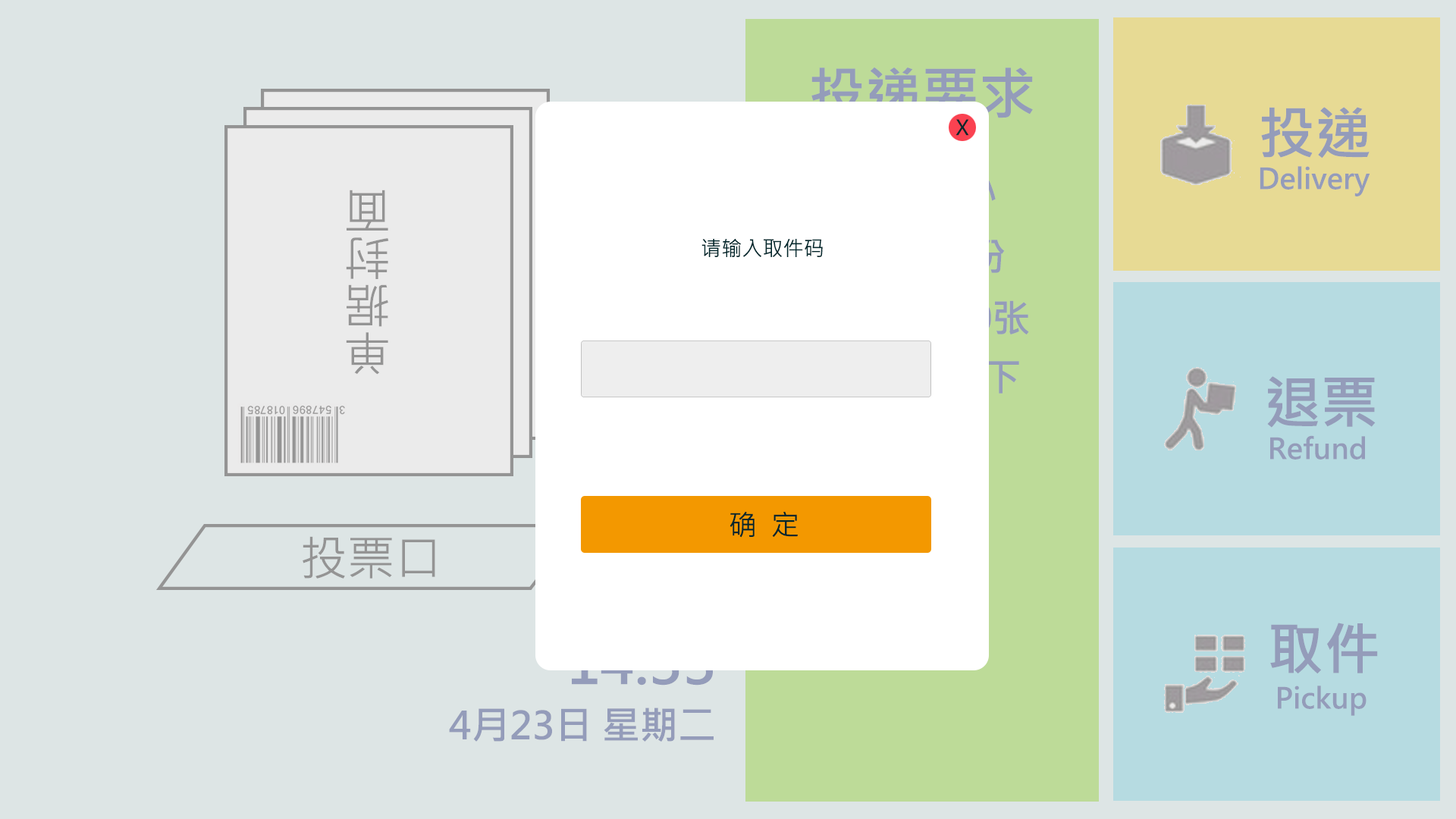
<style>
.page{position:relative;width:1456px;height:819px;background:#dde5e5}
.page>*{position:absolute;margin:0}
.t1{font:56.9px "MicrosoftJhengHeiBold";color:#949cba}
.t2{font:28.4px "MicrosoftJhengHeiBold";color:#949cba}
.t3{font:47.4px "MicrosoftJhengHeiRegular";color:#949494}
.t4{font:20.5px "MicrosoftJhengHeiRegular";color:#00272c}
.t5{font:28.4px "MicrosoftJhengHeiRegular";color:#00272c}
.t6{font:56.9px "MicrosoftJhengHeiBold"}
.t7{font:37.9px "MicrosoftJhengHeiBold";color:#949cba}
</style>
<div class="page">
<p class="t1" style="left:811px;top:67px;width:222px;height:51px">投递要求</p>
<p class="t1" style="left:1261px;top:107px;width:109px;height:51px">投递</p>
<p class="t2" style="left:1260px;top:166px;width:110px;height:30px">Delivery</p>
<p class="t3" style="left:346px;top:190px;width:43px;height:185px;rotate:180deg">单据封面</p>
<p class="t4" style="left:701px;top:238px;width:122px;height:19px">请输入取件码</p>
<p class="t1" style="left:1267px;top:376px;width:109px;height:52px">退票</p>
<p class="t2" style="left:1270px;top:435px;width:95px;height:25px">Refund</p>
<p class="t5" style="left:730px;top:511px;width:68px;height:27px">确  定</p>
<p class="t3" style="left:303px;top:536px;width:132px;height:43px">投票口</p>
<p class="t1" style="left:1270px;top:623px;width:108px;height:51px">取件</p>
<p class="t6" style="left:571px;top:640px;width:142px;height:46px">14:33</p>
<p class="t2" style="left:1278px;top:686px;width:88px;height:30px">Pickup</p>
<p class="t7" style="left:449px;top:708px;width:265px;height:34px">4月23日 星期二</p>
</div>
